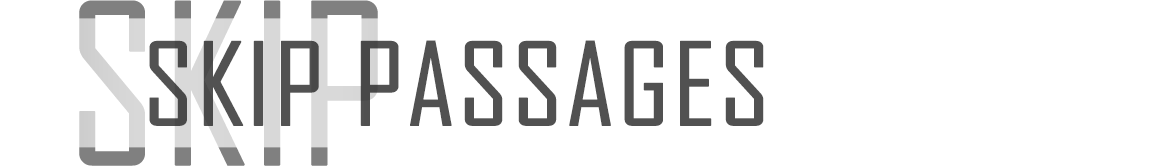
<style>
.page{position:relative;width:1156px;height:166px;background:#ffffff}
.page>*{position:absolute;margin:0}
.t1{font:214px "AgencyFB-Reg";text-transform:uppercase;font-weight:bold}
.t2{font:110px "AgencyFB-Reg";color:#515151;text-transform:uppercase;font-weight:bold;scale:1.1 1}
</style>
<div class="page">
<p class="t1" style="left:79px;top:0px;width:299px;height:166px">skip</p>
<p class="t2" style="left:149px;top:40px;width:615px;height:86px">skip passages</p>
</div>
